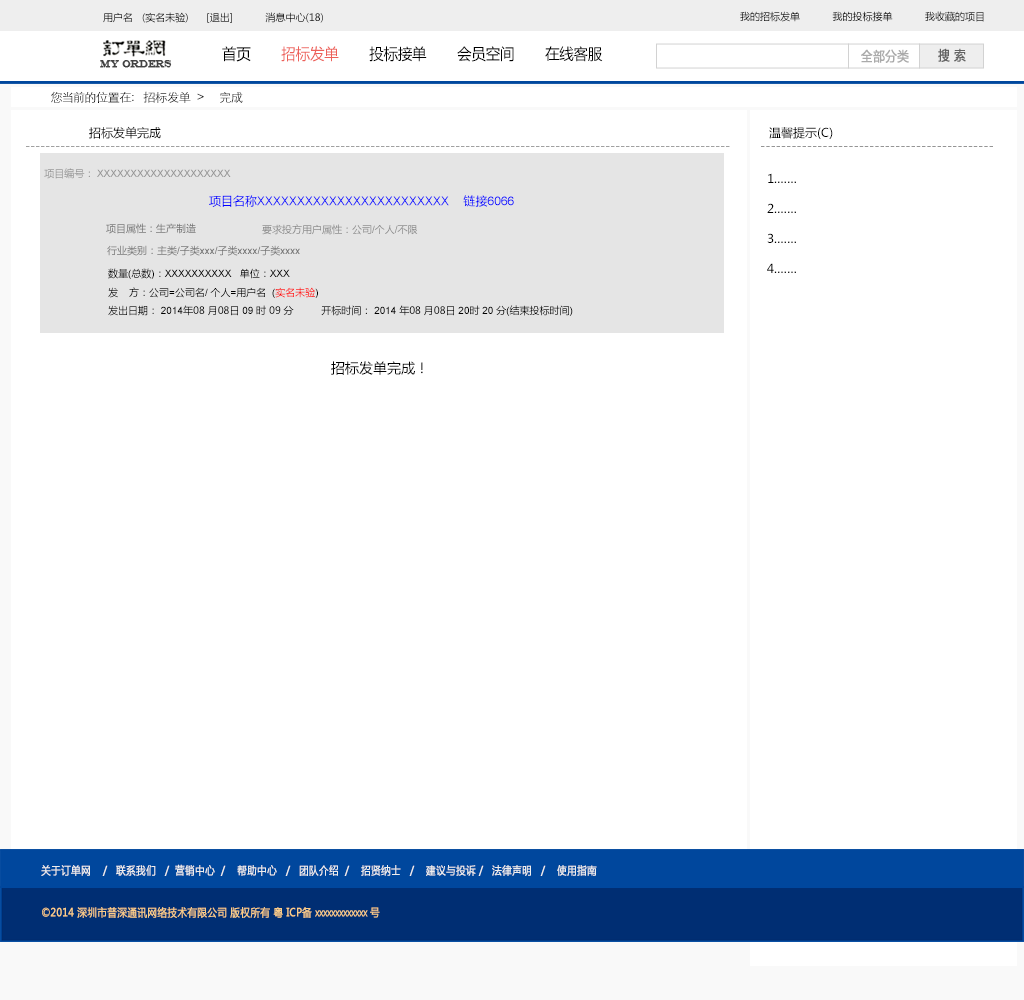
<style>
.page{position:relative;width:1024px;height:1000px;background:#ffffff}
.page>*{position:absolute;margin:0}
.t1{font:10px "MicrosoftYaHei";color:#000000}
.t2{font:15.4px "MicrosoftYaHei";color:#000000;font-variant:small-caps;scale:0.94 1}
.t3{font:15.4px "MicrosoftYaHei";color:#ed6059;font-variant:small-caps;scale:0.94 1}
.t4{font:13.2px "MicrosoftYaHei";color:#aaaaaa;font-variant:small-caps;font-weight:bold;scale:0.86 1}
.t5{font:13.2px "MicrosoftYaHei";color:#626262;font-variant:small-caps;font-weight:bold;scale:0.86 1}
.t6{font:9.9px "EngraversMT";color:#434343;font-variant:small-caps;font-weight:bold;scale:0.86 1}
.t7{font:12px "STXihei";color:#060606;scale:1.04 1}
.t8{font:12px "MicrosoftYaHei";color:#000000}
.t9{font:12px "MicrosoftYaHei";color:#a0a0a0}
.t10{font:12px "MicrosoftYaHei";color:#959595}
.t11{font:10px "ArialMT";color:#959595}
.t12{font:15px "ArialMT";color:#959595}
.t13{font:10px "MicrosoftYaHei";color:#959595}
.t14{font:12px/30px "MicrosoftYaHei";color:#000000}
.t15{font:12px "ArialMT";color:#0000ff}
.t16{font:12.5px "ArialMT";color:#0000ff}
.t17{font:12px "MicrosoftYaHei";color:#0000ff}
.t18{font:10px "MicrosoftYaHei";color:#707070}
.t19{font:10px "MicrosoftYaHei";color:#898989}
.t20{font:10px "ArialMT";color:#898989}
.t21{font:10px "ArialMT";color:#707070}
.t22{font:10px "ArialMT";color:#000000}
.t23{font:10px/18px "MicrosoftYaHei";color:#000000}
.t24{font:10px/18px "ArialMT";color:#000000}
.t25{font:14px "MicrosoftYaHei";color:#000000}
.t26{font:11px "MicrosoftYaHei";color:#eeeeee;font-variant:small-caps;font-weight:bold;scale:0.86 1}
.t27{font:15.4px "STXihei";color:#eeeeee;font-variant:small-caps;font-weight:bold;scale:0.86 1}
.t28{font:11px "MicrosoftYaHei";color:#facd89;font-variant:small-caps;font-weight:bold;scale:0.87 1}
.t29{font:11px "MicrosoftYaHei";color:#eeeeee;font-variant:small-caps;font-weight:bold;scale:0.87 1}
</style>
<div class="page">
<p class="t1" style="left:103px;top:12px;width:220px;height:11px">用户名   (实名未验)      [退出]           消息中心(18)</p>
<p class="t1" style="left:740px;top:11px;width:244px;height:11px">我的招标发单           我的投标接单           我收藏的项目</p>
<p class="t2" style="left:222px;top:46px;width:381px;height:16px">首页       <span class="t3">招标发单  </span>     投标接单       会员空间       在线客服</p>
<p class="t4" style="left:861px;top:49px;width:48px;height:14px">全部分类</p>
<p class="t5" style="left:938px;top:48px;width:28px;height:14px">搜 索</p>
<p class="t6" style="left:100px;top:60px;width:72px;height:8px">MY ORDERS</p>
<p class="t7" style="left:51px;top:91px;width:192px;height:12px">您当前的位置在：  招标发单  &gt;     完成</p>
<p class="t8" style="left:89px;top:126px;width:72px;height:13px">招标发单完成</p>
<p class="t8" style="left:769px;top:127px;width:64px;height:12px">温馨提示(C)</p>
<p class="t9" style="left:26px;top:146px;width:704px;height:1px">---------------------------------------------------------------------------------------------------------------------------------------------</p>
<p class="t10" style="left:761px;top:146px;width:232px;height:1px">---------------------------------------------</p>
<p class="t11" style="left:44px;top:168px;width:187px;height:11px"><span class="t12"> </span><span class="t13">项目编号：</span> XXXXXXXXXXXXXXXXXXXX</p>
<p class="t14" style="left:767px;top:173px;width:29px;height:100px">1.……<br>2.……<br>3.……<br>4.……</p>
<p class="t15" style="left:209px;top:195px;width:305px;height:12px"><span class="t16"><br></span><span class="t17">项目名称</span>XXXXXXXXXXXXXXXXXXXXXXXX    <span class="t17">链接</span>6066</p>
<p class="t18" style="left:106px;top:223px;width:90px;height:11px">项目属性：生产制造</p>
<p class="t19" style="left:262px;top:224px;width:156px;height:11px">要求投方用户属性：公司<span class="t20">/</span>个人<span class="t20">/</span>不限</p>
<p class="t18" style="left:107px;top:245px;width:193px;height:11px">行业类别：主类<span class="t21">/</span>子类<span class="t21">xxx/</span>子类<span class="t21">xxxx/</span>子类<span class="t21">xxxx</span></p>
<p class="t22" style="left:108px;top:268px;width:182px;height:11px"><span class="t1">数量</span>(<span class="t1">总数</span>)<span class="t1">：</span>XXXXXXXXXX   <span class="t1">单位：</span>XXX</p>
<p class="t23" style="left:108px;top:287px;width:465px;height:29px">发    方：公司<span class="t24">=</span>公司名<span class="t24">/ </span>个人<span class="t24">=</span>用户名<span class="t24">  (</span>实名未验<span class="t24">)<br></span>发出日期：<span class="t24"> 2014</span>年08 月08日<span class="t24"> 09 </span>时 09 分          开标时间：<span class="t24"> 2014 </span>年08 月08日<span class="t24"> 20</span>时<span class="t24"> 20 </span>分<span class="t24">(</span>结束投标时间<span class="t24">)</span></p>
<p class="t25" style="left:331px;top:361px;width:92px;height:14px">招标发单完成！</p>
<p class="t26" style="left:41px;top:864px;width:556px;height:12px"><span class="t27"><br><br></span>关于订单网    /   联系我们   /  营销中心  /    帮助中心   /   团队介绍  /    招贤纳士   /    建议与投诉 /   法律声明   /    使用指南</p>
<p class="t28" style="left:42px;top:907px;width:338px;height:11px"><span class="t29"> </span>©2014 深圳市普深通讯网络技术有限公司 版权所有 粤 ICP备 xxxxxxxxxxxxx 号</p>
</div>
